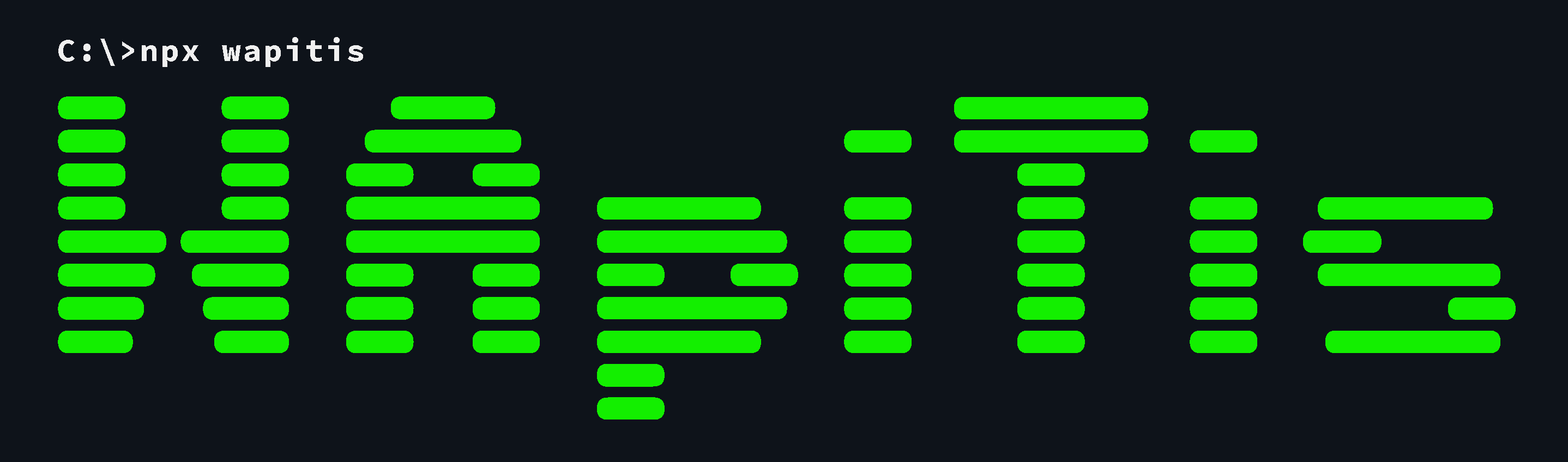
<style>
.page{position:relative;width:1568px;height:462px;background:#0e131a}
.page>*{position:absolute;margin:0}
.t1{font:31.8px "SourceCodePro-Bold";letter-spacing:0.05em;color:#f0f0f0}
.t2{font:408.9px "DS-Terminal";letter-spacing:0.05em;color:#13ef00}
</style>
<div class="page">
<p class="t1" style="left:58px;top:37px;width:305px;height:30px">C:\&gt;npx wapitis</p>
<p class="t2" style="left:58px;top:97px;width:1458px;height:323px">WApiTis</p>
</div>
